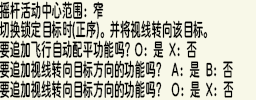
<style>
.page{position:relative;width:256px;height:100px;background:#f8f8e8}
.page>*{position:absolute;margin:0}
.t1{font:19px "ChillRoundFBold";color:#000000}
</style>
<div class="page">
<p class="t1" style="left:0px;top:1px;width:104px;height:19px">摇杆活动中心范围：窄</p>
<p class="t1" style="left:0px;top:20px;width:208px;height:20px">切换锁定目标时(正序)。并将视线转向该目标。</p>
<p class="t1" style="left:0px;top:40px;width:197px;height:19px">要追加飞行自动配平功能吗？O：是 X：否</p>
<p class="t1" style="left:0px;top:60px;width:233px;height:19px">要追加视线转向目标方向的功能吗？ A：是 B：否</p>
<p class="t1" style="left:0px;top:80px;width:234px;height:19px">要追加视线转向目标方向的功能吗？ O：是 X：否</p>
</div>
